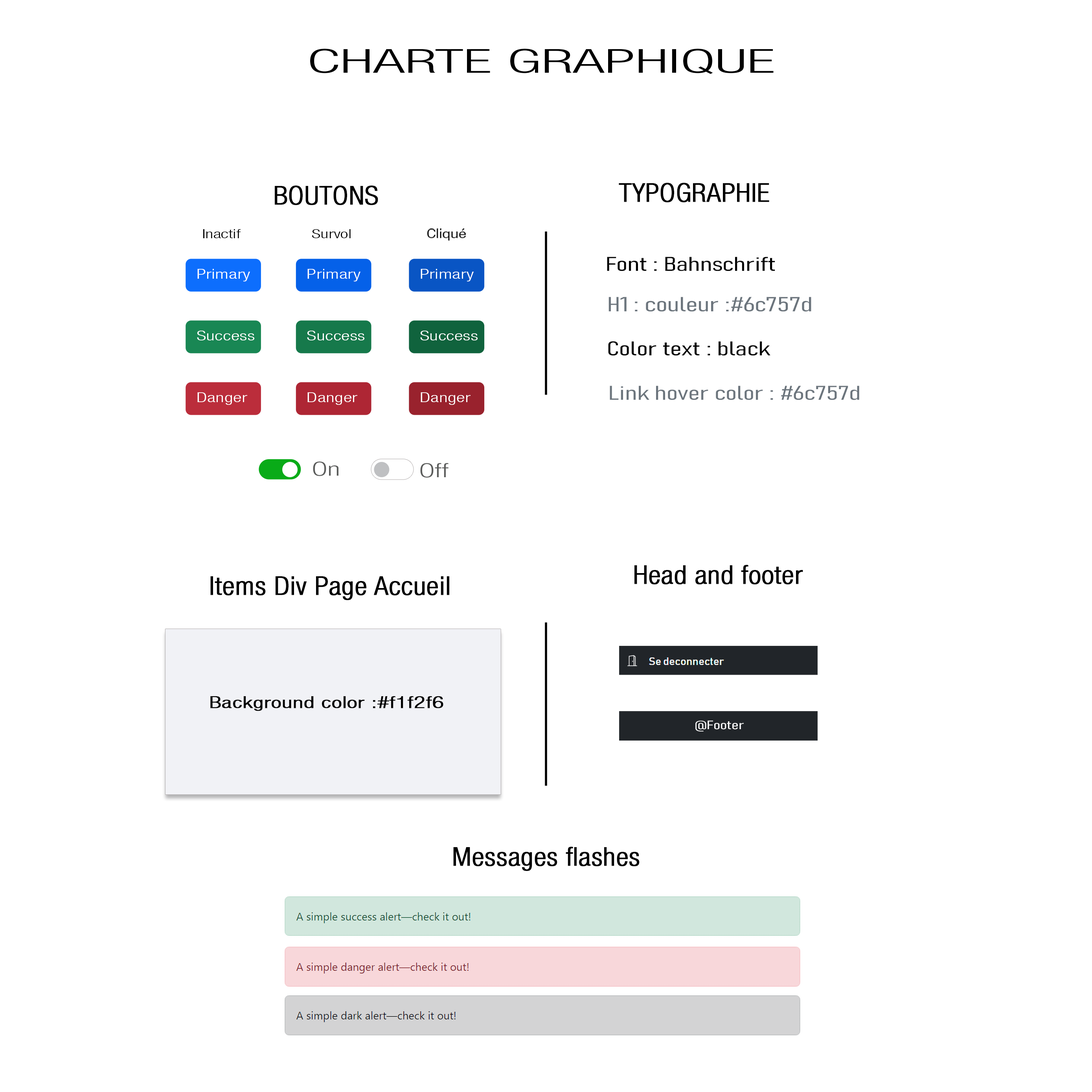
<style>
.page{position:relative;width:1092px;height:1092px;background:#ffffff}
.page>*{position:absolute;margin:0}
.t1{font:32.8px "HelveticaNeueLTStd-LtCn";color:#000000;scale:1.94 1}
.t2{font:25.8px "HelveticaNeueLTStd-LtCn";color:#000000;font-weight:bold;scale:1.09 1}
.t3{font:12.3px "HelveticaNeueLTStd-LtCn";color:#000000;scale:1.48 1}
.t4{font:19.7px "Bahnschrift-LightCondensed";color:#000000;font-weight:bold;scale:1.48 1}
.t5{font:13.4px "HelveticaNeueLTStd-LtCn";color:#ffffff;scale:1.48 1}
.t6{font:20.1px "Bahnschrift-LightCondensed";color:#6c757d;font-weight:bold;scale:1.48 1}
.t7{font:19.7px "Bahnschrift-LightCondensed";color:#6c757d;font-weight:bold;scale:1.48 1}
.t8{font:19.1px "HelveticaNeueLTStd-LtCn";color:#5b5c5b;scale:1.48 1}
.t9{font:15.9px "HelveticaNeueLTStd-LtCn";color:#000000;font-weight:bold;scale:1.48 1}
.t10{font:12.1px "Bahnschrift-LightCondensed";color:#ffffff;font-weight:bold;scale:1.48 1}
</style>
<div class="page">
<p class="t1" style="left:310px;top:49px;width:464px;height:25px">CHARTE GRAPHIQUE</p>
<p class="t2" style="left:275px;top:186px;width:103px;height:19px">BOUTONS</p>
<p class="t2" style="left:619px;top:183px;width:150px;height:19px">TYPOGRAPHIE</p>
<p class="t3" style="left:203px;top:229px;width:38px;height:9px">Inactif</p>
<p class="t3" style="left:312px;top:229px;width:39px;height:9px">Survol</p>
<p class="t4" style="left:607px;top:257px;width:168px;height:14px">Font : Bahnschrift</p>
<p class="t5" style="left:197px;top:269px;width:53px;height:12px">Primary</p>
<p class="t5" style="left:307px;top:269px;width:53px;height:12px">Primary</p>
<p class="t5" style="left:421px;top:269px;width:53px;height:12px">Primary</p>
<p class="t6" style="left:608px;top:297px;width:203px;height:15px">H1 : couleur :#6c757d</p>
<p class="t5" style="left:197px;top:331px;width:57px;height:9px">Success</p>
<p class="t5" style="left:307px;top:331px;width:57px;height:9px">Success</p>
<p class="t5" style="left:420px;top:331px;width:58px;height:9px">Success</p>
<p class="t4" style="left:608px;top:341px;width:162px;height:15px">Color text : black</p>
<p class="t7" style="left:610px;top:386px;width:249px;height:14px">Link hover color : #6c757d</p>
<p class="t5" style="left:197px;top:392px;width:50px;height:13px">Danger</p>
<p class="t5" style="left:307px;top:392px;width:50px;height:13px">Danger</p>
<p class="t5" style="left:421px;top:392px;width:50px;height:13px">Danger</p>
<p class="t8" style="left:313px;top:461px;width:25px;height:15px">On</p>
<p class="t8" style="left:420px;top:463px;width:29px;height:15px">Off</p>
<p class="t2" style="left:634px;top:565px;width:169px;height:20px">Head and footer</p>
<p class="t2" style="left:210px;top:576px;width:239px;height:24px">Items Div Page Accueil</p>
<p class="t9" style="left:210px;top:696px;width:233px;height:15px">Background color :#f1f2f6</p>
<p class="t10" style="left:695px;top:721px;width:49px;height:11px">@Footer</p>
<p class="t2" style="left:453px;top:847px;width:187px;height:24px">Messages flashes</p>
</div>
